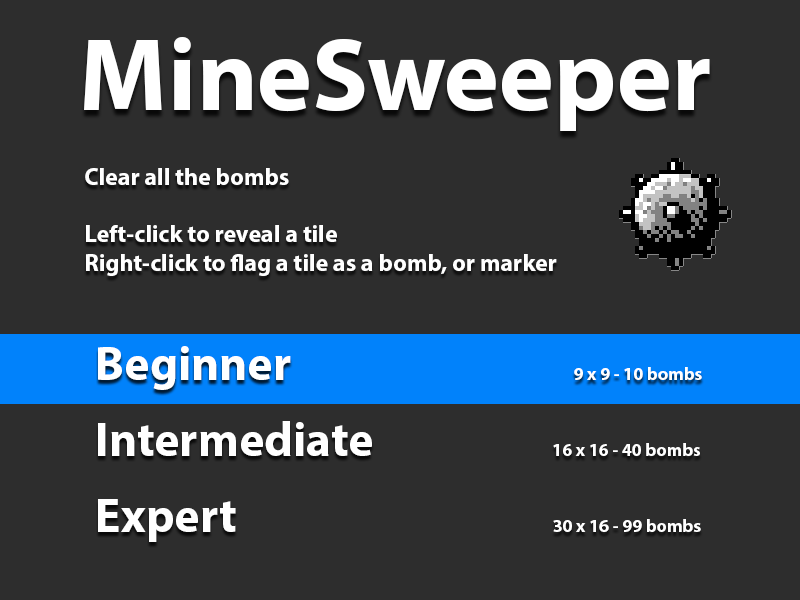
<style>
.page{position:relative;width:800px;height:600px;background:#2d2d2d}
.page>*{position:absolute;margin:0}
.t1{font:104px "MyriadPro-Bold";color:#ffffff}
.t2{font:24px "MyriadPro-Bold";color:#ffffff}
.t3{font:48px/76px "MyriadPro-Bold";color:#ffffff}
.t4{font:18px "MyriadPro-Bold";color:#ffffff}
</style>
<div class="page">
<p class="t1" style="left:84px;top:37px;width:626px;height:94px">MineSweeper</p>
<p class="t2" style="left:85px;top:168px;width:472px;height:108px">Clear all the bombs<br><br>Left-click to reveal a tile<br>Right-click to flag a tile as a bomb, or marker</p>
<p class="t3" style="left:98px;top:346px;width:274px;height:196px">Beginner<br>Intermediate<br>Expert</p>
<p class="t4" style="left:574px;top:367px;width:128px;height:13px">9 x 9 - 10 bombs</p>
<p class="t4" style="left:553px;top:443px;width:147px;height:13px">16 x 16 - 40 bombs</p>
<p class="t4" style="left:553px;top:519px;width:148px;height:13px">30 x 16 - 99 bombs</p>
</div>
